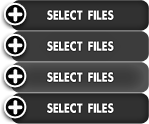
<style>
.page{position:relative;width:149px;height:124px}
.page>*{position:absolute;margin:0}
.t1{font:12px "a-bug's-life---debugged-Regular";letter-spacing:0.025em;color:#ffffff;text-transform:uppercase}
</style>
<div class="page">
<p class="t1" style="left:47px;top:10px;width:67px;height:10px">select files</p>
<p class="t1" style="left:47px;top:41px;width:67px;height:10px">select files</p>
<p class="t1" style="left:47px;top:72px;width:67px;height:10px">select files</p>
<p class="t1" style="left:47px;top:103px;width:67px;height:10px">select files</p>
</div>
